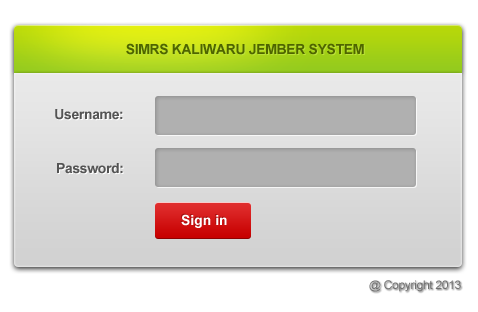
<style>
.page{position:relative;width:478px;height:312px;background:#ffffff}
.page>*{position:absolute;margin:0}
.t1{font:13.7px "Arial-BoldMT";letter-spacing:-0.025em;color:#4f6500}
.t2{font:13.7px "Arial-BoldMT";letter-spacing:-0.025em;color:#545454}
.t3{font:13.7px "Arial-BoldMT";color:#ffffff}
.t4{font:11.8px "ArialMT";letter-spacing:-0.025em;color:#707070}
</style>
<div class="page">
<p class="t1" style="left:126px;top:43px;width:238px;height:12px">SIMRS KALIWARU JEMBER SYSTEM</p>
<p class="t2" style="left:55px;top:109px;width:68px;height:11px">Username:</p>
<p class="t2" style="left:57px;top:163px;width:66px;height:11px">Password:</p>
<p class="t3" style="left:181px;top:214px;width:46px;height:14px">Sign in</p>
<p class="t4" style="left:369px;top:280px;width:92px;height:12px">@ Copyright 2013</p>
</div>
